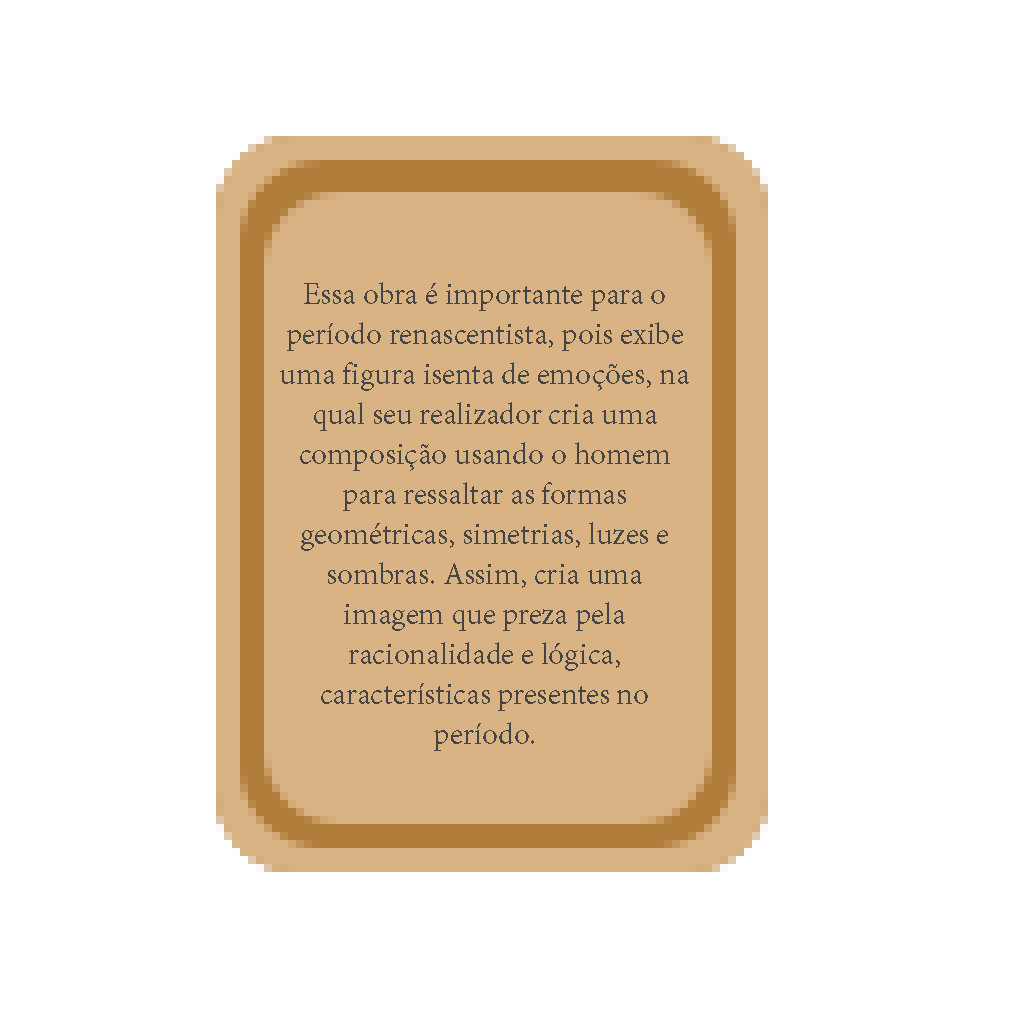
<style>
.page{position:relative;width:1024px;height:1024px;background:#ffffff}
.page>*{position:absolute;margin:0}
.t1{font:33.3px "AdobeDevanagari-Regular";color:#454545}
</style>
<div class="page">
<p class="t1" style="left:280px;top:282px;width:409px;height:469px;text-align:center">Essa obra é importante para o período renascentista, pois exibe uma figura isenta de emoções, na qual seu realizador cria uma composição usando o homem para ressaltar as formas geométricas, simetrias, luzes e sombras. Assim, cria uma imagem que preza pela racionalidade e lógica, características presentes no período.</p>
</div>
